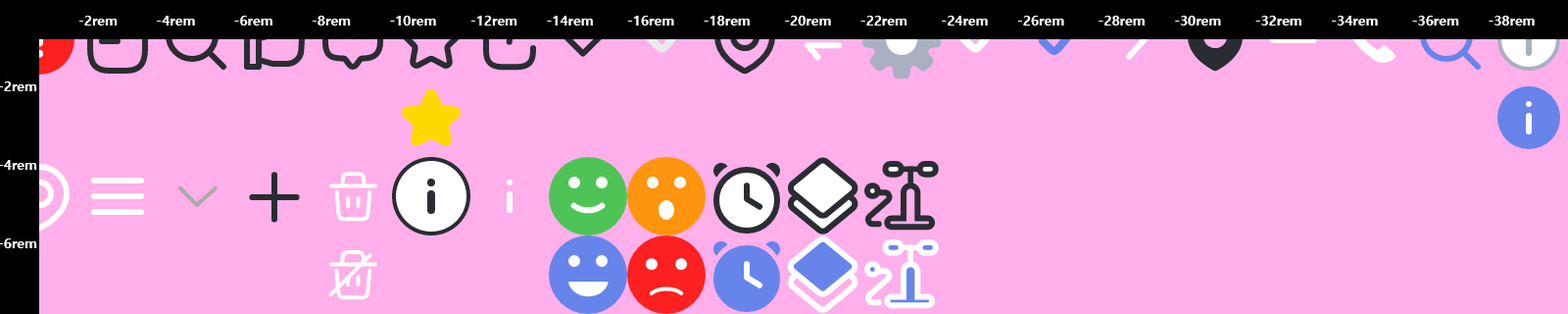
<style>
.page{position:relative;width:1568px;height:314px;background:#ffafea}
.page>*{position:absolute;margin:0}
.t1{font:13.7px "MalgunGothicBold";color:#ffffff}
.t2{font:13.7px/39.2px "MalgunGothicBold";color:#ffffff}
</style>
<div class="page">
<p class="t1" style="left:78px;top:16px;width:1457px;height:9px">-2rem        -4rem        -6rem        -8rem        -10rem       -12rem      -14rem       -16rem      -18rem       -20rem      -22rem       -24rem      -26rem       -28rem      -30rem       -32rem      -34rem       -36rem      -38rem</p>
<p class="t2" style="left:0px;top:81px;width:37px;height:167px">-2rem<br><br>-4rem<br><br>-6rem</p>
</div>
